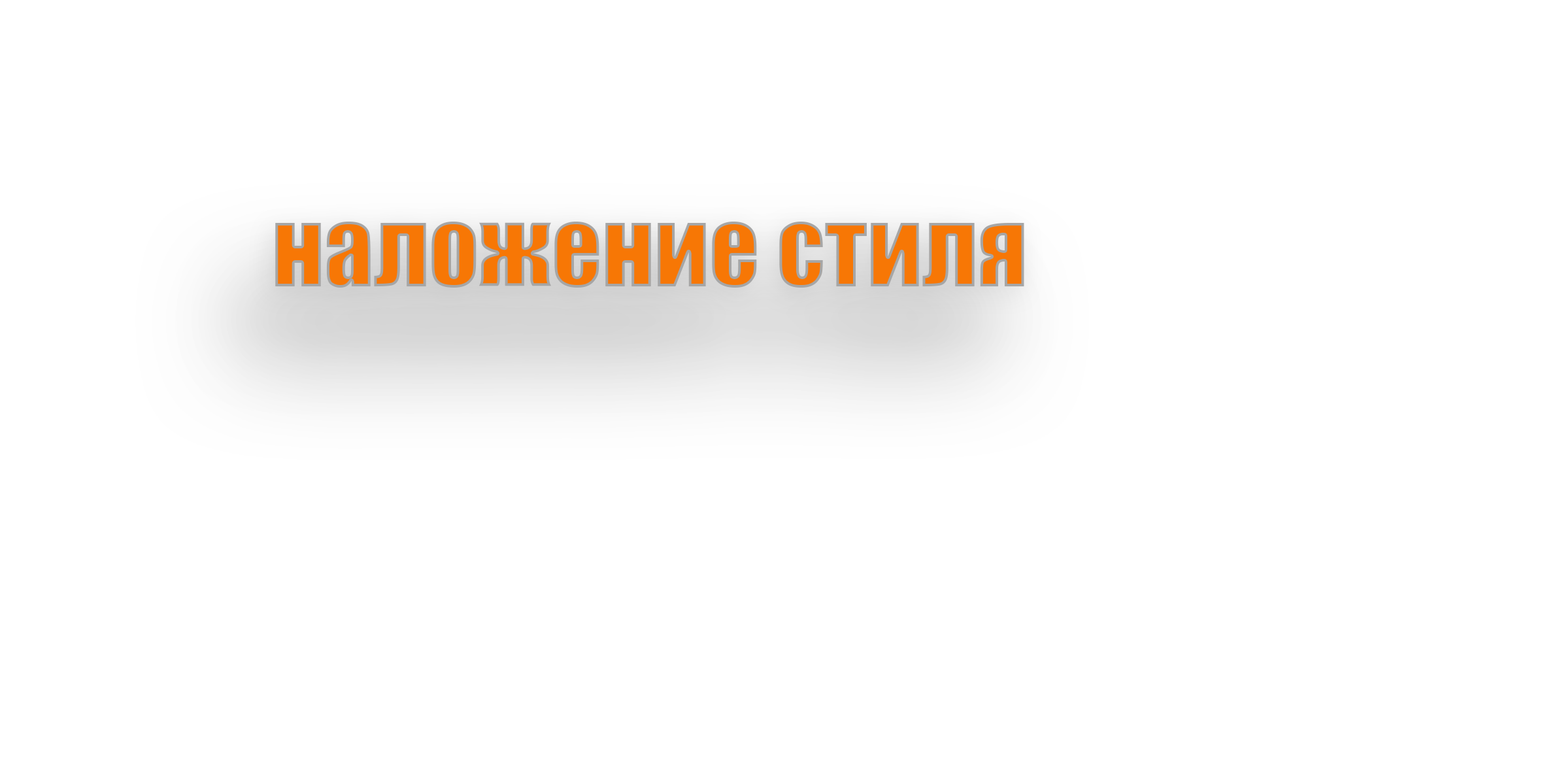
<style>
.page{position:relative;width:1544px;height:772px;background:#ffffff}
.page>*{position:absolute;margin:0}
.t1{font:98.1px "Impact";color:#f77705}
</style>
<div class="page">
<p class="t1" style="left:275px;top:222px;width:750px;height:66px">наложение стиля</p>
</div>
